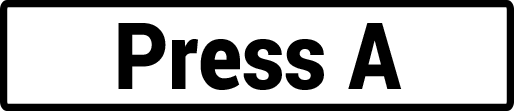
<style>
.page{position:relative;width:515px;height:111px;background:#ffffff}
.page>*{position:absolute;margin:0}
.t1{font:92.6px "Roboto-Black";color:#000000;scale:0.9 1}
</style>
<div class="page">
<p class="t1" style="left:118px;top:23px;width:284px;height:67px">Press A</p>
</div>
